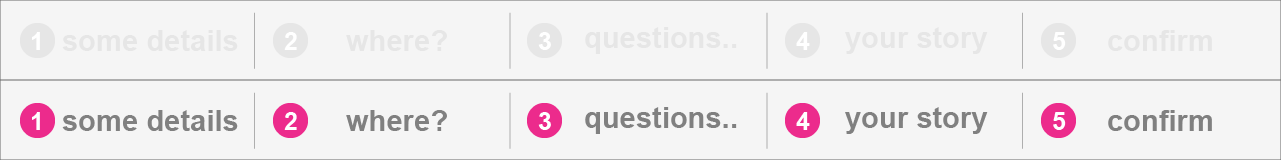
<style>
.page{position:relative;width:1281px;height:160px;background:#f5f5f5}
.page>*{position:absolute;margin:0}
.t1{font:29.2px "Arial-BoldMT";color:#e6e6e6}
.t2{font:25px "Arial-BoldMT";color:#ffffff}
.t3{font:29.2px "Arial-BoldMT";color:#808080}
</style>
<div class="page">
<p class="t1" style="left:62px;top:30px;width:176px;height:21px">some details</p>
<p class="t1" style="left:346px;top:30px;width:101px;height:21px">where?</p>
<p class="t1" style="left:585px;top:27px;width:152px;height:27px">questions..</p>
<p class="t1" style="left:845px;top:27px;width:143px;height:27px">your story</p>
<p class="t1" style="left:1108px;top:30px;width:104px;height:21px">confirm</p>
<p class="t2" style="left:32px;top:32px;width:8px;height:18px">1</p>
<p class="t2" style="left:284px;top:32px;width:13px;height:18px">2</p>
<p class="t2" style="left:538px;top:32px;width:13px;height:18px">3</p>
<p class="t2" style="left:796px;top:32px;width:14px;height:18px">4</p>
<p class="t2" style="left:1053px;top:32px;width:13px;height:18px">5</p>
<p class="t2" style="left:32px;top:112px;width:8px;height:18px">1</p>
<p class="t3" style="left:62px;top:110px;width:176px;height:21px">some details</p>
<p class="t2" style="left:284px;top:112px;width:13px;height:18px">2</p>
<p class="t3" style="left:346px;top:110px;width:101px;height:21px">where?</p>
<p class="t2" style="left:538px;top:112px;width:13px;height:18px">3</p>
<p class="t3" style="left:585px;top:107px;width:152px;height:27px">questions..</p>
<p class="t2" style="left:796px;top:112px;width:14px;height:18px">4</p>
<p class="t3" style="left:845px;top:107px;width:143px;height:27px">your story</p>
<p class="t2" style="left:1053px;top:112px;width:13px;height:18px">5</p>
<p class="t3" style="left:1108px;top:110px;width:104px;height:21px">confirm</p>
</div>
